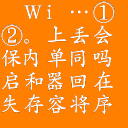
<style>
.page{position:relative;width:128px;height:128px;background:#ff8000}
.page>*{position:absolute;margin:0}
.t1{font:21px/23px "DFPKaiW5";letter-spacing:0.095em;color:#ffffff}
.t2{font:21px/23px "DFPKaiW5";letter-spacing:0.155em;color:#ffffff}
.t3{font:21px/23px "DFPKaiW5";letter-spacing:0.715em;color:#ffffff}
.t4{font:21px/23px "DFPKaiW5";letter-spacing:0.135em;color:#ffffff}
.t5{font:22px/23px "DFPKaiW5";letter-spacing:0.095em;color:#ffffff}
.t6{font:22px/23px "DFPKaiW5";letter-spacing:-0.085em;color:#ffffff}
.t7{font:21px/23px "DFPKaiW5";letter-spacing:0.195em;color:#ffffff}
.t8{font:21px/23px "DFPKaiW5";letter-spacing:-0.085em;color:#ffffff}
.t9{font:21px/23px "DFPKaiW5";letter-spacing:0.235em;color:#ffffff}
.t10{font:21px/23px "DFPKaiW5";letter-spacing:-0.005em;color:#ffffff}
.t11{font:21px/23px "DFPKaiW5";letter-spacing:-0.025em;color:#ffffff}
.t12{font:21px/23px "DFPKaiW5";letter-spacing:0.115em;color:#ffffff}
.t13{font:21px/23px "DFPKaiW5";letter-spacing:0.215em;color:#ffffff}
.t14{font:21px/23px "DFPKaiW5";letter-spacing:0.055em;color:#ffffff}
</style>
<div class="page">
<p class="t1" style="left:1px;top:2px;width:113px;height:112px"><span class="t2">W</span><span class="t3">i</span><span class="t4">…</span><span class="t5">①<br></span><span class="t6">②</span><span class="t7">。</span>上丢会<br><span class="t8">保</span><span class="t9">内</span><span class="t10">单</span><span class="t7">同</span>吗<br>启<span class="t11">和</span><span class="t12">器</span><span class="t13">回</span>在<br> <span class="t2">失</span><span class="t14">存</span><span class="t4">容</span>将序</p>
</div>
